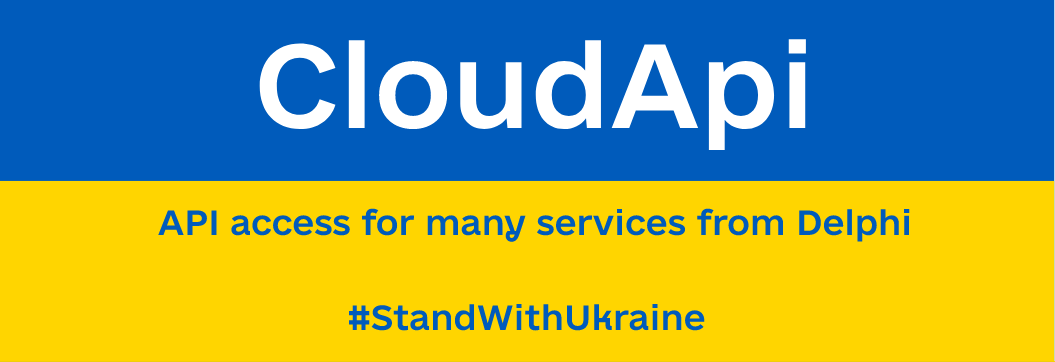
<style>
.page{position:relative;width:1055px;height:362px;background:#005bbb}
.page>*{position:absolute;margin:0}
.t1{font:112.3px "e-UkraineHead-LOGO";color:#ffffff}
.t2{font:33px "e-UkraineHead-LOGO";color:#005bbb}
</style>
<div class="page">
<p class="t1" style="left:259px;top:39px;width:547px;height:111px">CloudApi</p>
<p class="t2" style="left:158px;top:208px;width:752px;height:34px">API access for many services from Delphi</p>
<p class="t2" style="left:349px;top:303px;width:356px;height:28px">#StandWithUkraine</p>
</div>
